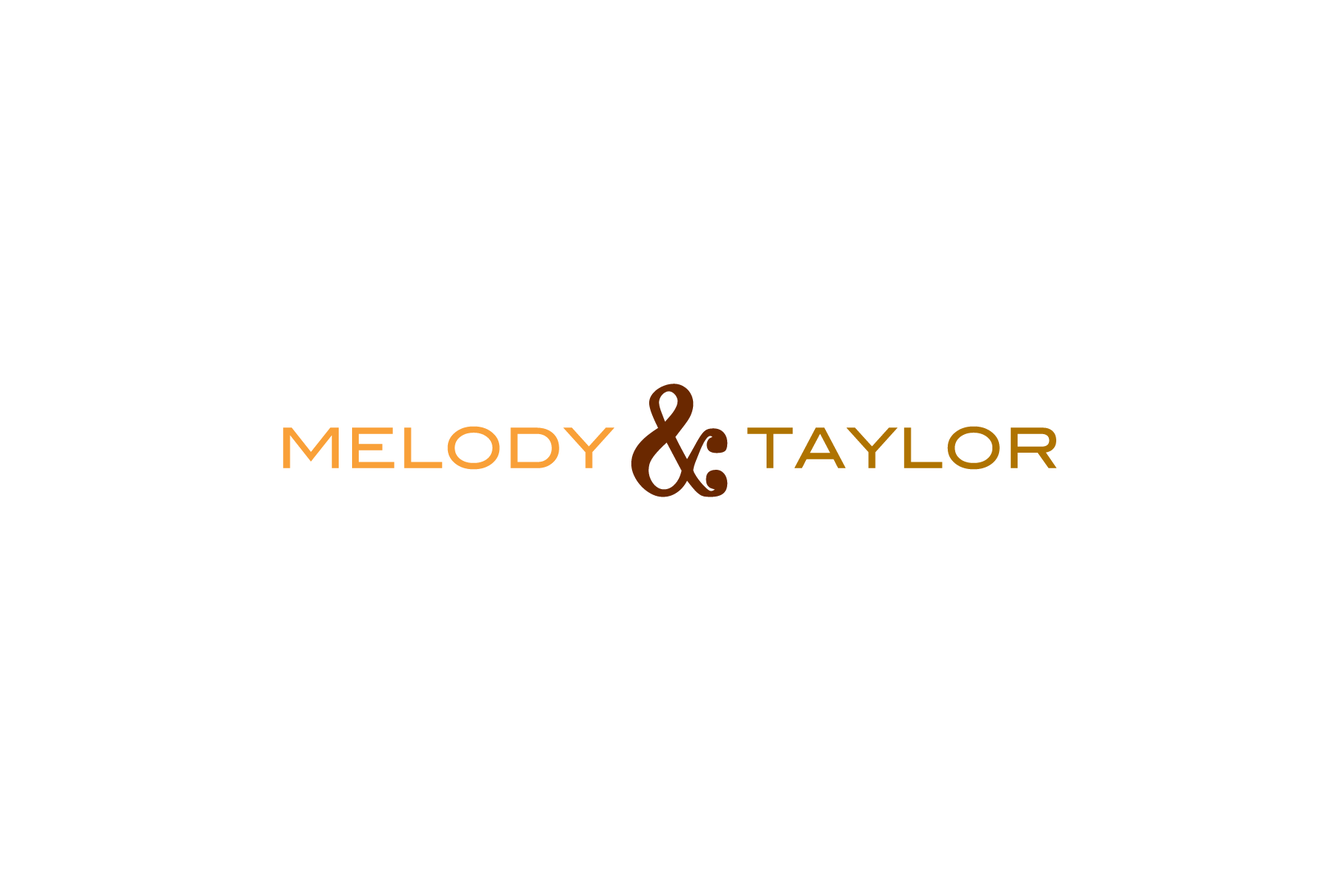
<style>
.page{position:relative;width:1337px;height:892px;background:#ffffff}
.page>*{position:absolute;margin:0}
.t1{font:55.6px "BlairMdITCTTMedium";color:#f9a038}
.t2{font:138.5px "Duality-Regular";color:#6a2800}
.t3{font:55.6px "BlairMdITCTTMedium";color:#af7300}
</style>
<div class="page">
<p class="t1" style="left:283px;top:383px;width:774px;height:114px">MELODY <span class="t2">&amp; </span><span class="t3">TAYLOR</span></p>
</div>
